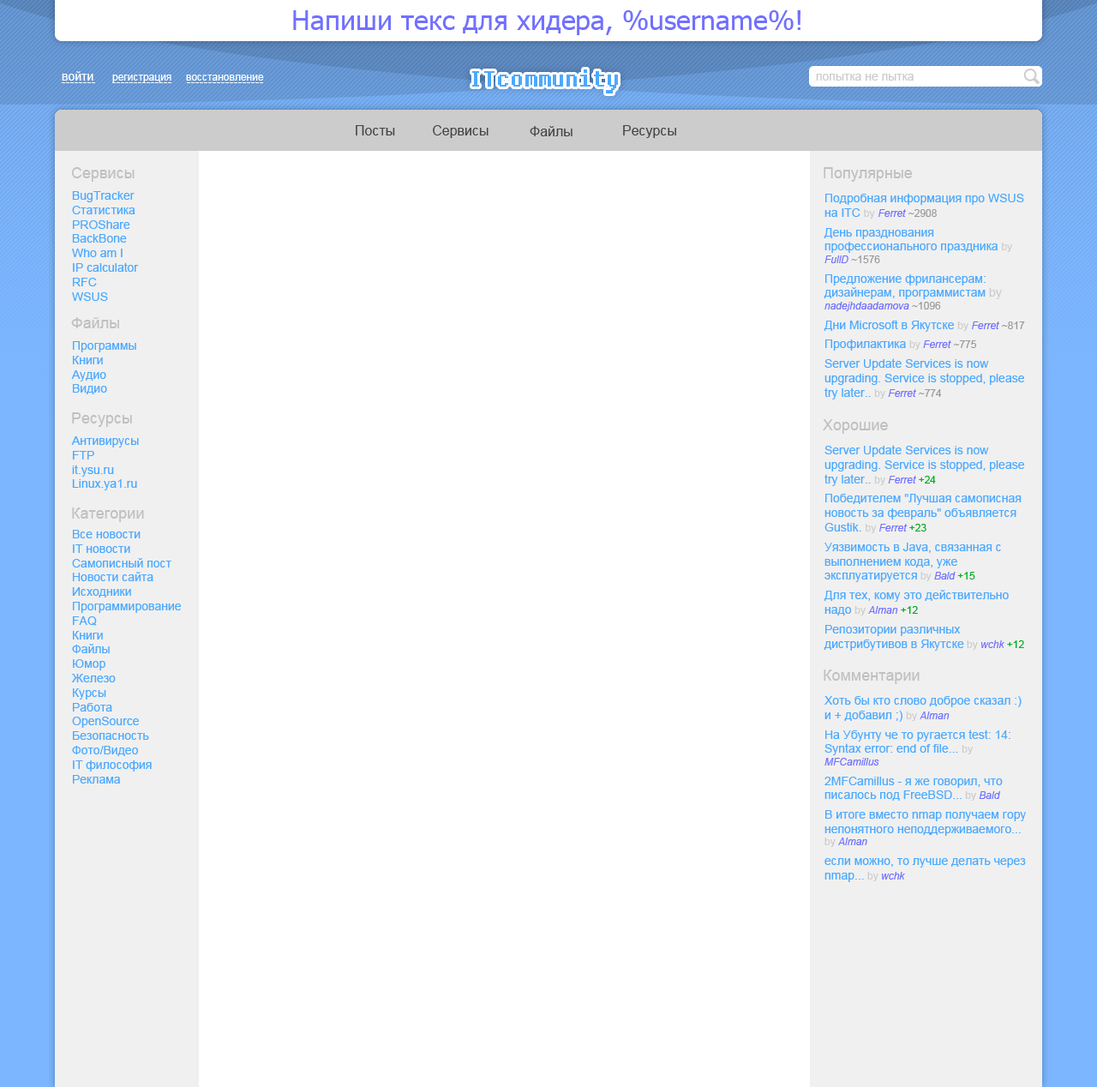
<style>
.page{position:relative;width:1097px;height:1087px;background:#ffffff}
.page>*{position:absolute;margin:0}
.t1{font:27.4px "Tahoma";color:#7170ff}
.t2{font:12px "ArialMT";color:#ffffff}
.t3{font:10.3px "ArialMT";color:#ffffff}
.t4{font:27.4px "Fixedsys";color:#4ca9ff}
.t5{font:12px "ArialMT"}
.t6{font:12px "ArialMT";color:#cccccc}
.t7{font:13.7px "ArialMT";color:#444444}
.t8{font:15.4px "ArialMT";color:#c0c0c0}
.t9{font:12px "ArialMT";color:#4ca9ff}
.t10{font:10.3px "ArialMT";color:#cccccc}
.t11{font:10.3px "Arial-ItalicMT";color:#7170ff}
.t12{font:10.3px "ArialMT";color:#999999}
.t13{font:10.3px "ArialMT";color:#00ad21}
</style>
<div class="page">
<p class="t1" style="left:293px;top:10px;width:508px;height:25px">Напиши текс для хидера, %username%!</p>
<p class="t2" style="left:62px;top:71px;width:31px;height:10px">войти</p>
<p class="t3" style="left:112px;top:75px;width:152px;height:7px">регистрация     восстановление</p>
<p class="t4" style="left:472px;top:69px;width:146px;height:24px">ITcommunity</p>
<p class="t5" style="left:816px;top:72px;width:33px;height:11px">хабра</p>
<p class="t6" style="left:816px;top:74px;width:98px;height:7px">попытка не пытка</p>
<p class="t7" style="left:356px;top:125px;width:39px;height:10px">Посты</p>
<p class="t7" style="left:433px;top:125px;width:56px;height:13px">Сервисы</p>
<p class="t7" style="left:530px;top:126px;width:43px;height:10px">Файлы</p>
<p class="t7" style="left:623px;top:125px;width:53px;height:13px">Ресурсы</p>
<p class="t8" style="left:71px;top:167px;width:64px;height:15px">Сервисы</p>
<p class="t8" style="left:824px;top:167px;width:89px;height:15px">Популярные</p>
<p class="t9" style="left:72px;top:191px;width:67px;height:110px">BugTracker<br>Статистика<br>PROShare<br>BackBone<br>Who am I<br>IP calculator<br>RFC<br>WSUS</p>
<p class="t9" style="left:824px;top:194px;width:201px;height:205px">Подробная информация про WSUS на ITC <span class="t10">by </span><span class="t11">Ferret </span><span class="t12">~2908<br></span>День празднования профессионального праздника <span class="t10">by </span><span class="t11">FullD </span><span class="t12">~1576  <br></span>Предложение фрилансерам: дизайнерам, программистам <span class="t6">by </span><span class="t11">nadejhdaadamova </span><span class="t12">~1096 <br></span>Дни Microsoft в Якутске <span class="t10">by </span><span class="t11">Ferret </span><span class="t12">~817 <br></span>Профилактика <span class="t10">by </span><span class="t11">Ferret </span><span class="t12">~775 <br></span>Server Update Services is now upgrading. Service is stopped, please try later.. <span class="t10">by </span><span class="t11">Ferret </span><span class="t12">~774 <br></span>Победителем "Лучшая самописная новость за февраль" объявляется Gustik. <span class="t10">by </span><span class="t11">Ferret </span><span class="t12">733 <br></span>Уязвимость в Java, связанная с выполнением кода, уже эксплуатируется <span class="t10">by </span><span class="t11">Bald </span><span class="t12">703 <br></span>Для тех, кому это действительно надо <span class="t10">by </span><span class="t11">Alman </span><span class="t12">692 <br></span>Репозитории различных дистрибутивов в Якутске <span class="t10">by </span><span class="t11">wchk </span><span class="t12">682</span></p>
<p class="t8" style="left:71px;top:317px;width:48px;height:11px">Файлы</p>
<p class="t9" style="left:71px;top:341px;width:65px;height:53px">Программы<br>Книги<br>Аудио<br>Видио</p>
<p class="t8" style="left:72px;top:412px;width:60px;height:15px">Ресурсы</p>
<p class="t8" style="left:823px;top:419px;width:65px;height:15px">Хорошие</p>
<p class="t9" style="left:71px;top:436px;width:68px;height:54px">Антивирусы<br>FTP<br>it.ysu.ru<br>Linux.ya1.ru</p>
<p class="t9" style="left:824px;top:445px;width:200px;height:206px">Server Update Services is now upgrading. Service is stopped, please try later.. <span class="t10">by </span><span class="t11">Ferret </span><span class="t13">+24 <br></span>Победителем "Лучшая самописная новость за февраль" объявляется Gustik. <span class="t10">by </span><span class="t11">Ferret </span><span class="t13">+23 <br></span>Уязвимость в Java, связанная с выполнением кода, уже эксплуатируется <span class="t10">by </span><span class="t11">Bald </span><span class="t13">+15 <br></span>Для тех, кому это действительно надо <span class="t10">by </span><span class="t11">Alman </span><span class="t13">+12 <br></span>Репозитории различных дистрибутивов в Якутске <span class="t10">by </span><span class="t11">wchk </span><span class="t13">+12</span></p>
<p class="t8" style="left:72px;top:507px;width:72px;height:15px">Категории</p>
<p class="t9" style="left:72px;top:530px;width:110px;height:253px">Все новости <br>IT новости <br>Самописный пост <br>Новости сайта <br>Исходники <br>Программирование <br>FAQ <br>Книги <br>Файлы <br>Юмор <br>Железо <br>Курсы <br>Работа <br>OpenSource <br>Безопасность <br>Фото/Видео <br>IT философия <br>Реклама</p>
<p class="t8" style="left:824px;top:669px;width:96px;height:15px">Комментарии</p>
<p class="t9" style="left:825px;top:696px;width:201px;height:186px">Хоть бы кто слово доброе сказал :) и + добавил ;) <span class="t10">by </span><span class="t11">Alman<br></span>На Убунту че то ругается test: 14: Syntax error: end of file... <span class="t10">by </span><span class="t11">MFCamillus<br></span>2MFCamillus - я же говорил, что писалось под FreeBSD... <span class="t10">by </span><span class="t11">Bald<br></span>В итоге вместо nmap получаем гору непонятного неподдерживаемого... <span class="t10">by </span><span class="t11">Alman<br></span>если можно, то лучше делать через nmap... <span class="t10">by </span><span class="t11">wchk</span></p>
</div>
